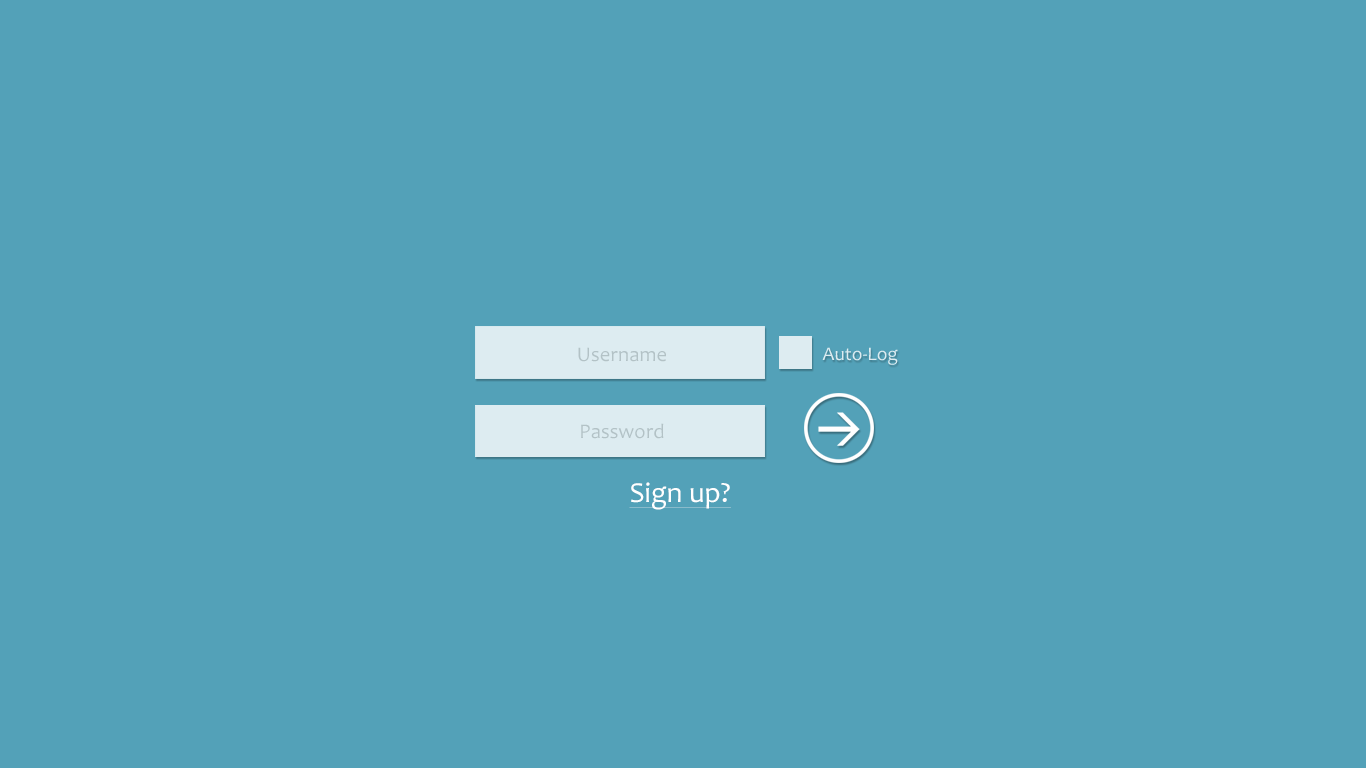
<style>
.page{position:relative;width:1366px;height:768px;background:#53a1b8}
.page>*{position:absolute;margin:0}
.t1{font:20.8px "Candara";color:#b3c2c6}
.t2{font:19.3px "Candara";color:#ddecf1}
.t3{font:29.2px "Candara";color:#ffffff;text-decoration:underline}
</style>
<div class="page">
<p class="t1" style="left:578px;top:347px;width:88px;height:15px">Username</p>
<p class="t2" style="left:822px;top:347px;width:76px;height:18px">Auto-Log</p>
<p class="t1" style="left:581px;top:423px;width:83px;height:16px">Password</p>
<p class="t3" style="left:629px;top:482px;width:102px;height:28px">Sign up?</p>
</div>
